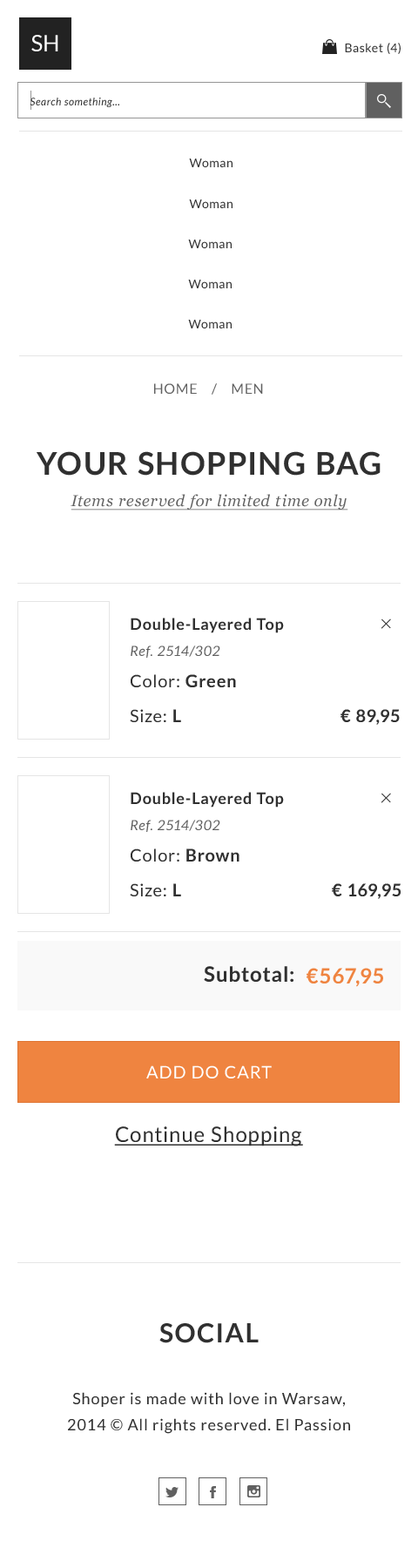
<style>
.page{position:relative;width:418px;height:1568px;background:#ffffff}
.page>*{position:absolute;margin:0}
.t1{font:22.5px "Lato-Regular";color:#ffffff;text-transform:uppercase}
.t2{font:12.2px "Lato-Regular";letter-spacing:0.05em;color:#303030}
.t3{font:10.5px "Lato-Italic";letter-spacing:0.05em;color:#303030}
.t4{font:13.9px "Lato-Regular";letter-spacing:0.05em;color:#606060;text-transform:uppercase}
.t5{font:15.7px/31.4px "Georgia-Italic";letter-spacing:0.05em;color:#606060;text-decoration:underline}
.t6{font:31.4px/31.4px "Lato-Bold";letter-spacing:0.05em;color:#303030;text-transform:uppercase}
.t7{font:15.7px/26.1px "Lato-Bold";letter-spacing:0.05em;color:#303030}
.t8{font:13.9px/26.1px "Lato-Italic";letter-spacing:0.05em;color:#606060}
.t9{font:26.1px "Lato-Light";letter-spacing:0.05em;color:#303030;text-transform:uppercase}
.t10{font:17.4px "Lato-Regular";letter-spacing:0.05em;color:#303030}
.t11{font:17.4px "Lato-Bold";letter-spacing:0.05em;color:#303030}
.t12{font:20.9px "Lato-Bold";letter-spacing:0.05em;color:#303030}
.t13{font:20.9px "Lato-Bold";letter-spacing:0.05em;color:#ef8440}
.t14{font:17.4px "Lato-Regular";letter-spacing:0.05em;color:#ffffff;text-transform:uppercase}
.t15{font:20.9px "Lato-Regular";letter-spacing:0.05em;color:#303030;text-decoration:underline}
.t16{font:26.1px "Lato-Bold";letter-spacing:0.05em;color:#303030;text-transform:uppercase}
.t17{font:15.7px/26.1px "Lato-Regular";letter-spacing:0.05em;color:#303030}
</style>
<div class="page">
<p class="t1" style="left:31px;top:35px;width:27px;height:16px">SH</p>
<p class="t2" style="left:345px;top:43px;width:56px;height:11px">Basket (4)</p>
<p class="t3" style="left:30px;top:98px;width:89px;height:9px">Search something...</p>
<p class="t2" style="left:189px;top:159px;width:44px;height:8px">Woman</p>
<p class="t2" style="left:189px;top:199px;width:44px;height:9px">Woman</p>
<p class="t2" style="left:188px;top:240px;width:44px;height:8px">Woman</p>
<p class="t2" style="left:188px;top:280px;width:44px;height:8px">Woman</p>
<p class="t2" style="left:188px;top:320px;width:44px;height:8px">Woman</p>
<p class="t4" style="left:154px;top:383px;width:109px;height:12px">HOME    /    Men</p>
<p class="t5" style="left:37px;top:451px;width:344px;height:59px;text-align:center"><span class="t6">Your Shopping Bag<br></span>Items reserved for limited time only</p>
<p class="t7" style="left:131px;top:618px;width:153px;height:40px">Double-Layered Top<br><span class="t8">Ref. 2514/302</span></p>
<p class="t9" style="left:381px;top:618px;width:10px;height:11px;rotate:45deg">+</p>
<p class="t10" style="left:131px;top:674px;width:105px;height:13px">Color: <span class="t11">Green</span></p>
<p class="t10" style="left:130px;top:709px;width:51px;height:13px">Size: <span class="t11">L</span></p>
<p class="t11" style="left:341px;top:709px;width:59px;height:16px">€ 89,95</p>
<p class="t7" style="left:131px;top:792px;width:153px;height:40px">Double-Layered Top<br><span class="t8">Ref. 2514/302</span></p>
<p class="t9" style="left:381px;top:793px;width:10px;height:10px;rotate:45deg">+</p>
<p class="t10" style="left:131px;top:848px;width:109px;height:14px">Color: <span class="t11">Brown</span></p>
<p class="t10" style="left:130px;top:883px;width:51px;height:13px">Size: <span class="t11">L</span></p>
<p class="t11" style="left:332px;top:883px;width:70px;height:16px">€ 169,95</p>
<p class="t12" style="left:204px;top:966px;width:90px;height:16px">Subtotal:</p>
<p class="t13" style="left:307px;top:968px;width:76px;height:19px">€567,95</p>
<p class="t14" style="left:146px;top:1065px;width:126px;height:13px">Add do cart</p>
<p class="t15" style="left:114px;top:1126px;width:189px;height:20px">Continue Shopping</p>
<p class="t16" style="left:159px;top:1323px;width:100px;height:20px">social</p>
<p class="t17" style="left:68px;top:1392px;width:282px;height:42px;text-align:center">Shoper is made with love in Warsaw,<br>2014 © All rights reserved. El Passion</p>
</div>
